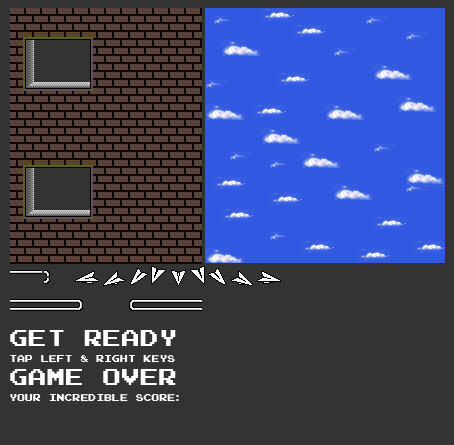
<style>
.page{position:relative;width:454px;height:445px;background:#333333}
.page>*{position:absolute;margin:0}
.t1{font:18.7px "ArcadeNormal";letter-spacing:0.02em;color:#ffffff}
.t2{font:7.9px "ArcadeNormal";letter-spacing:0.02em;color:#ffffff}
</style>
<div class="page">
<p class="t1" style="left:10px;top:330px;width:166px;height:16px">Get ready</p>
<p class="t2" style="left:10px;top:355px;width:165px;height:8px">Tap left &amp; right keys</p>
<p class="t1" style="left:10px;top:369px;width:166px;height:16px">Game Over</p>
<p class="t2" style="left:10px;top:394px;width:169px;height:8px">Your Incredible score:</p>
</div>
